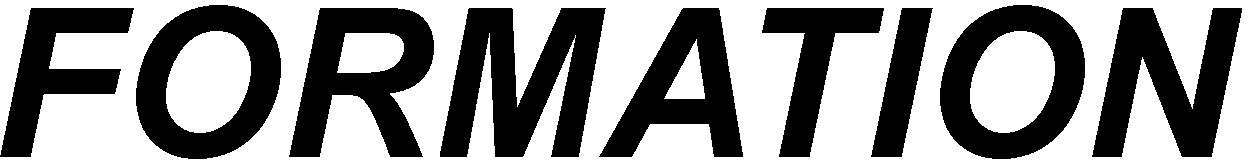
<style>
.page{position:relative;width:1248px;height:160px;background:#ffffff}
.page>*{position:absolute;margin:0}
.t1{font:208px "Arial-BoldItalicMT";color:#000000}
</style>
<div class="page">
<p class="t1" style="left:0px;top:5px;width:1242px;height:154px">FORMATION</p>
</div>
